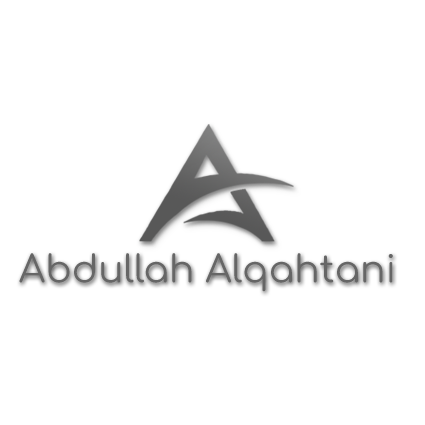
<style>
.page{position:relative;width:425px;height:425px;background:#ffffff}
.page>*{position:absolute;margin:0}
.t1{font:37.5px "Comfortaa-Regular";color:#666666}
</style>
<div class="page">
<p class="t1" style="left:19px;top:253px;width:374px;height:39px">Abdullah Alqahtani</p>
</div>
